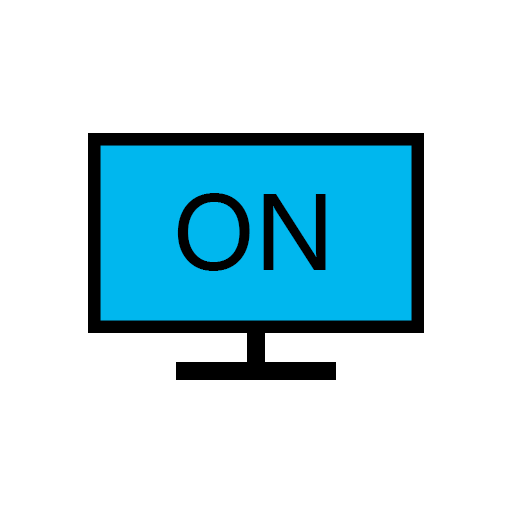
<style>
.page{position:relative;width:512px;height:512px;background:#ffffff}
.page>*{position:absolute;margin:0}
.t1{font:100px "MicrosoftYaHei";color:#000000}
</style>
<div class="page">
<p class="t1" style="left:177px;top:193px;width:149px;height:78px">ON</p>
</div>
